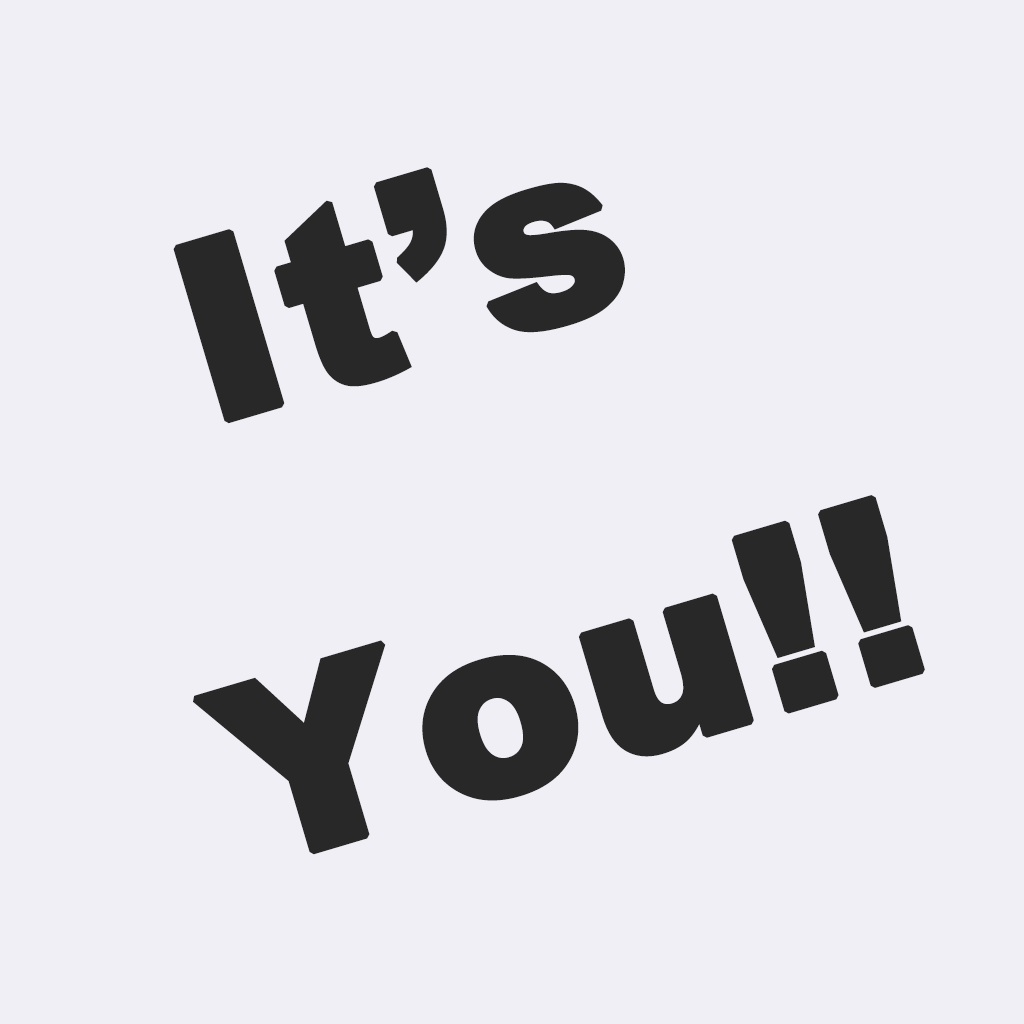
<style>
.page{position:relative;width:1024px;height:1024px;background:#f0eff5}
.page>*{position:absolute;margin:0}
.t1{font:250px "Arial-Black";color:#282828;font-weight:bold}
</style>
<div class="page">
<p class="t1" style="left:173px;top:167px;width:752px;height:688px;text-align:center;rotate:-17deg">It’s <br>You!!</p>
</div>
